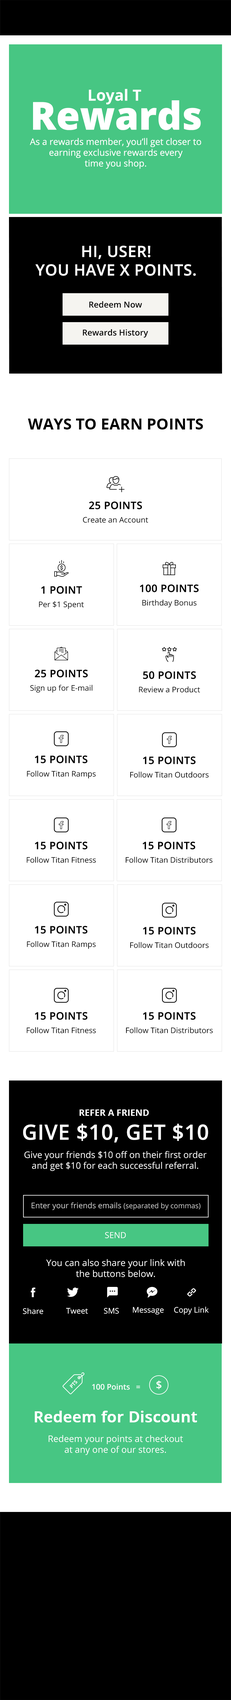
<style>
.page{position:relative;width:231px;height:1700px;background:#ffffff}
.page>*{position:absolute;margin:0}
.t1{font:15.4px "OpenSans-Bold";color:#ffffff}
.t2{font:38.6px "OpenSans-Extrabold";color:#ffffff}
.t3{font:9px "OpenSans-Regular";color:#ffffff}
.t4{font:15.4px "OpenSans-Semibold";color:#ffffff;text-transform:uppercase;font-weight:bold}
.t5{font:8.4px "OpenSans-Semibold";color:#000000}
.t6{font:15.4px "OpenSans-Bold";color:#000000;text-transform:uppercase}
.t7{font:10.3px "OpenSans-Semibold";color:#000000;text-transform:uppercase;font-weight:bold}
.t8{font:7.7px "OpenSans-Regular";color:#000000}
.t9{font:9px "OpenSans-Bold";color:#ffffff;text-transform:uppercase}
.t10{font:20.9px "OpenSans-Semibold";color:#ffffff;text-transform:uppercase;font-weight:bold}
.t11{font:7.7px "OpenSans-Regular";letter-spacing:0.002em;color:#cbcbcb}
.t12{font:7.1px "OpenSans-Regular";letter-spacing:0.002em;color:#cbcbcb}
.t13{font:8.4px "OpenSans-Regular";letter-spacing:0.002em;color:#ffffff}
.t14{font:7.7px "OpenSans-Regular";color:#ffffff}
.t15{font:4.9px "OpenSans-Bold";color:#ffffff}
.t16{font:7.7px "OpenSans-Semibold";color:#ffffff}
.t17{font:10.7px "OpenSans-Semibold";color:#ffffff}
.t18{font:15.4px "OpenSans-Semibold";color:#ffffff;font-weight:bold}
</style>
<div class="page">
<p class="t1" style="left:89px;top:89px;width:52px;height:15px">Loyal T</p>
<p class="t2" style="left:33px;top:100px;width:168px;height:30px">Rewards</p>
<p class="t3" style="left:30px;top:138px;width:172px;height:31px;text-align:center">As a rewards member, you’ll get closer to<br>earning exclusive rewards every<br>time you shop.</p>
<p class="t4" style="left:35px;top:246px;width:161px;height:30px;text-align:center">HI, USER!<br>YOU HAVE X POINTS.</p>
<p class="t5" style="left:89px;top:301px;width:53px;height:7px">Redeem Now</p>
<p class="t5" style="left:83px;top:329px;width:66px;height:9px">Rewards History</p>
<p class="t6" style="left:28px;top:419px;width:175px;height:10px">Ways To Earn Points</p>
<p class="t7" style="left:89px;top:501px;width:53px;height:8px">25 Points</p>
<p class="t8" style="left:83px;top:517px;width:66px;height:6px">Create an Account</p>
<p class="t7" style="left:41px;top:586px;width:41px;height:8px">1 Point</p>
<p class="t7" style="left:140px;top:584px;width:59px;height:8px">100 Points</p>
<p class="t8" style="left:39px;top:601px;width:45px;height:8px">Per $1 Spent</p>
<p class="t8" style="left:142px;top:599px;width:55px;height:9px">Birthday Bonus</p>
<p class="t7" style="left:35px;top:670px;width:53px;height:7px">25 Points</p>
<p class="t7" style="left:143px;top:671px;width:53px;height:8px">50 Points</p>
<p class="t8" style="left:30px;top:685px;width:63px;height:8px">Sign up for E-mail</p>
<p class="t8" style="left:139px;top:686px;width:62px;height:6px">Review a Product</p>
<p class="t7" style="left:35px;top:755px;width:53px;height:8px">15 Points</p>
<p class="t7" style="left:143px;top:756px;width:53px;height:8px">15 Points</p>
<p class="t8" style="left:27px;top:770px;width:69px;height:9px">Follow Titan Ramps</p>
<p class="t8" style="left:131px;top:771px;width:78px;height:7px">Follow Titan Outdoors</p>
<p class="t7" style="left:35px;top:842px;width:53px;height:7px">15 Points</p>
<p class="t7" style="left:143px;top:842px;width:53px;height:7px">15 Points</p>
<p class="t8" style="left:27px;top:857px;width:69px;height:6px">Follow Titan Fitness</p>
<p class="t8" style="left:126px;top:857px;width:87px;height:6px">Follow Titan Distributors</p>
<p class="t7" style="left:35px;top:926px;width:53px;height:7px">15 Points</p>
<p class="t7" style="left:143px;top:927px;width:53px;height:7px">15 Points</p>
<p class="t8" style="left:27px;top:941px;width:69px;height:8px">Follow Titan Ramps</p>
<p class="t8" style="left:131px;top:942px;width:78px;height:6px">Follow Titan Outdoors</p>
<p class="t7" style="left:35px;top:1012px;width:53px;height:8px">15 Points</p>
<p class="t7" style="left:143px;top:1012px;width:53px;height:8px">15 Points</p>
<p class="t8" style="left:27px;top:1027px;width:69px;height:6px">Follow Titan Fitness</p>
<p class="t8" style="left:126px;top:1027px;width:87px;height:6px">Follow Titan Distributors</p>
<p class="t9" style="left:80px;top:1109px;width:69px;height:7px">REFER A FRIEND</p>
<p class="t10" style="left:23px;top:1123px;width:186px;height:19px">Give $10, Get $10</p>
<p class="t3" style="left:24px;top:1151px;width:183px;height:20px;text-align:center">Give your friends $10 off on their first order<br>and get $10 for each successful referral.</p>
<p class="t11" style="left:32px;top:1202px;width:169px;height:8px">Enter your friends emails <span class="t12">(separated by commas)</span></p>
<p class="t13" style="left:105px;top:1232px;width:21px;height:6px">SEND</p>
<p class="t3" style="left:46px;top:1259px;width:139px;height:18px;text-align:center">You can also share your link with<br>the buttons below.</p>
<p class="t14" style="left:23px;top:1308px;width:20px;height:6px">Share</p>
<p class="t14" style="left:66px;top:1308px;width:22px;height:6px">Tweet</p>
<p class="t14" style="left:104px;top:1308px;width:15px;height:6px">SMS</p>
<p class="t14" style="left:133px;top:1307px;width:31px;height:7px">Message</p>
<p class="t14" style="left:174px;top:1306px;width:35px;height:8px">Copy Link</p>
<p class="t15" style="left:70px;top:1380px;width:7px;height:8px;rotate:-47deg">PTS</p>
<p class="t16" style="left:92px;top:1383px;width:48px;height:7px">100 Points   =</p>
<p class="t17" style="left:157px;top:1380px;width:5px;height:9px">$</p>
<p class="t18" style="left:35px;top:1410px;width:162px;height:12px">Redeem for Discount</p>
<p class="t3" style="left:49px;top:1435px;width:134px;height:20px;text-align:center">Redeem your points at checkout<br>at any one of our stores.</p>
</div>
